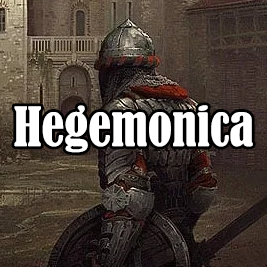
<style>
.page{position:relative;width:267px;height:267px}
.page>*{position:absolute;margin:0}
.t1{font:50.5px "BernardMT-Condensed";color:#ffffff}
</style>
<div class="page">
<p class="t1" style="left:14px;top:105px;width:239px;height:48px">Hegemonica</p>
</div>
